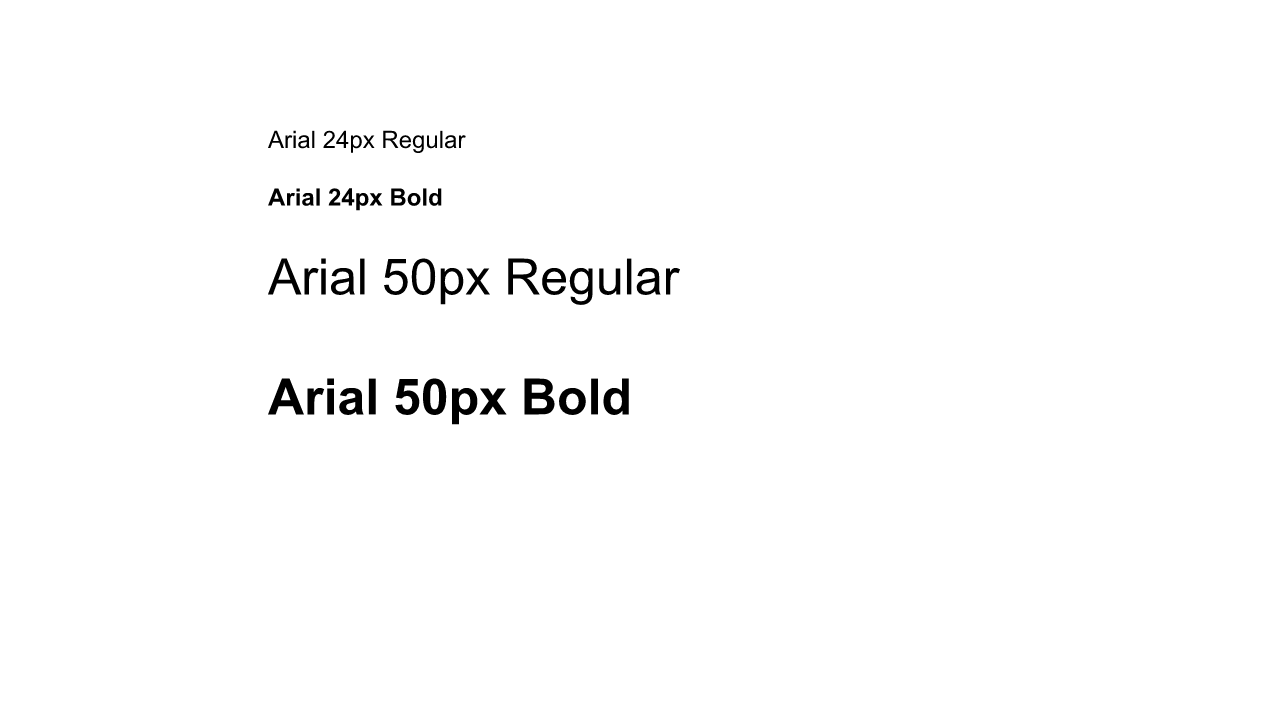
<style>
.page{position:relative;width:1280px;height:720px;background:#ffffff}
.page>*{position:absolute;margin:0}
.t1{font:24px "ArialMT";color:#000000}
.t2{font:24px "Arial-BoldMT";color:#000000}
.t3{font:50px "ArialMT";color:#000000}
.t4{font:50px "Arial-BoldMT";color:#000000}
</style>
<div class="page">
<p class="t1" style="left:267px;top:130px;width:414px;height:295px">Arial 24px Regular<br><br><span class="t2">Arial 24px Bold<br><br></span><span class="t3">Arial 50px Regular<br><br></span><span class="t4">Arial 50px Bold</span></p>
</div>
